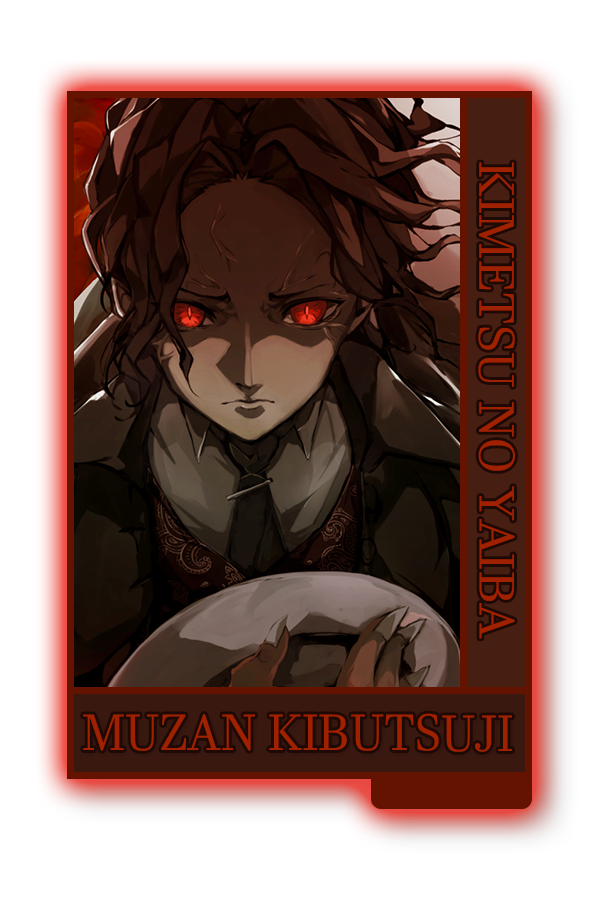
<style>
.page{position:relative;width:600px;height:900px;background:#ffffff}
.page>*{position:absolute;margin:0}
.t1{font:48.8px "JavaneseText";color:#952002}
.t2{font:50px "JavaneseText";color:#952002;scale:0.93 1}
</style>
<div class="page">
<p class="t1" style="left:478px;top:162px;width:37px;height:477px;rotate:90deg">KIMETSU NO YAIBA</p>
<p class="t2" style="left:83px;top:713px;width:429px;height:39px">MUZAN KIBUTSUJI</p>
</div>
